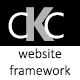
<style>
.page{position:relative;width:80px;height:80px;background:#000000}
.page>*{position:absolute;margin:0}
.t1{font:36px "MicrosoftPhagsPa";letter-spacing:0.05em;color:#ffffff}
.t2{font:48px "KhmerUI-Bold";letter-spacing:0.003em;color:#b2b2b2}
.t3{font:14px "Calibri-Light";color:#000000}
</style>
<div class="page">
<p class="t1" style="left:8px;top:12px;width:56px;height:27px">C C</p>
<p class="t2" style="left:26px;top:7px;width:29px;height:34px">K</p>
<p class="t3" style="left:9px;top:48px;width:62px;height:27px;text-align:center">website<br>framework</p>
</div>
